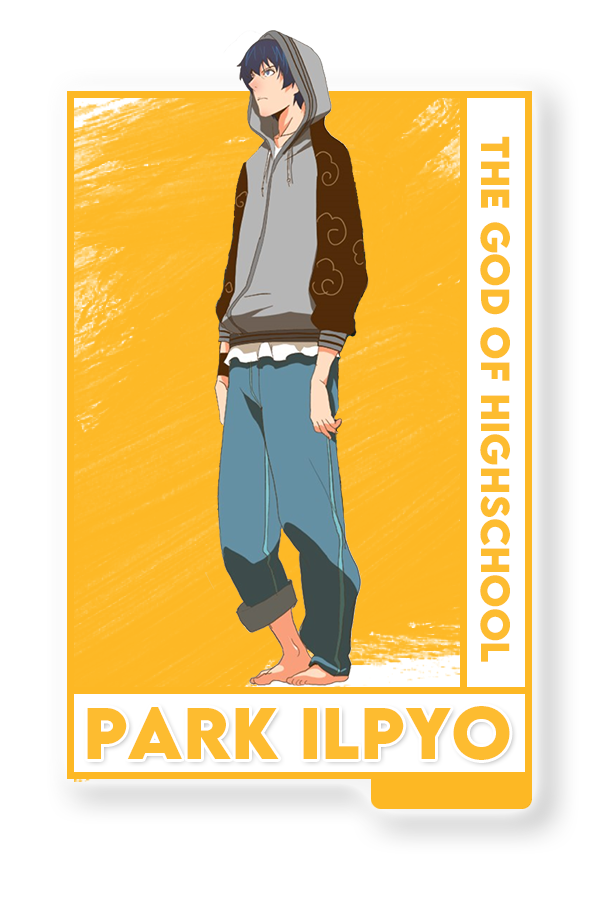
<style>
.page{position:relative;width:600px;height:900px;background:#ffffff}
.page>*{position:absolute;margin:0}
.t1{font:36px "LEMONMILK-Bold";color:#fdbc30}
.t2{font:65.2px "LEMONMILK-Bold";color:#fdbc30}
</style>
<div class="page">
<p class="t1" style="left:480px;top:136px;width:30px;height:526px;rotate:90deg">the god of highschool</p>
<p class="t2" style="left:87px;top:706px;width:423px;height:54px">Park IlPYO</p>
</div>
